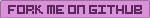
<style>
.page{position:relative;width:150px;height:18px;background:#d992d9}
.page>*{position:absolute;margin:0}
.t1{font:12px "Pixel-Art";color:#5e2a5e}
</style>
<div class="page">
<p class="t1" style="left:8px;top:5px;width:134px;height:9px">FORK ME ON GITHUB</p>
</div>
